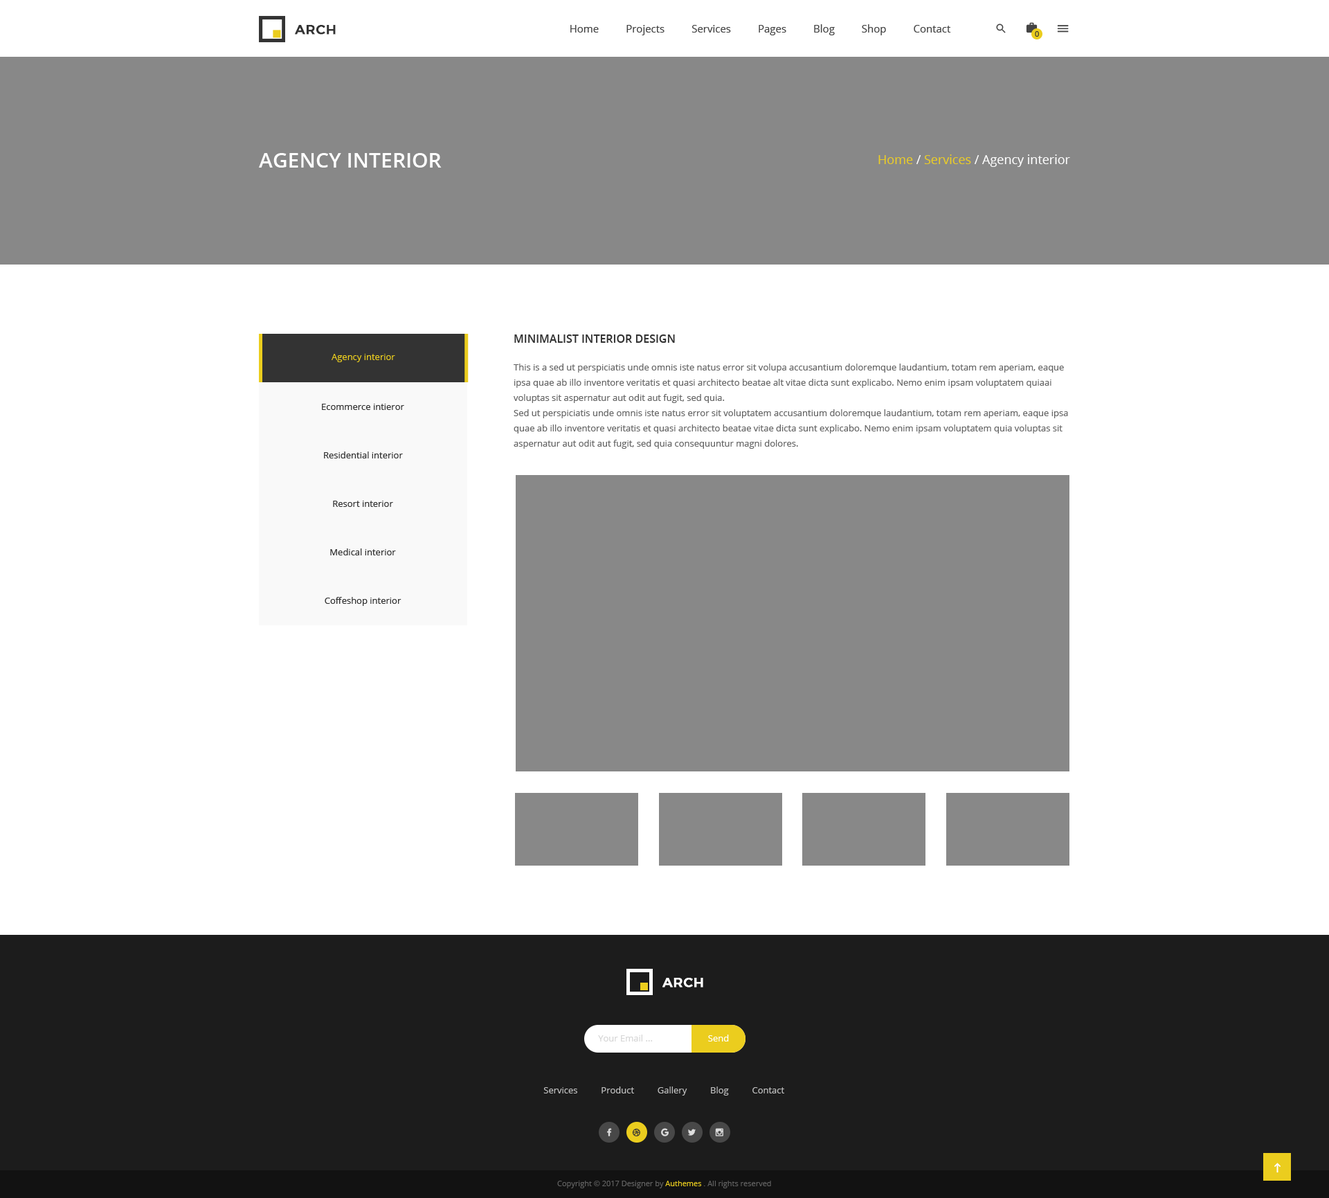
<style>
.page{position:relative;width:1329px;height:1198px;background:#ffffff}
.page>*{position:absolute;margin:0}
.t1{font:13.2px "Montserrat-Medium";letter-spacing:0.025em;color:#333333;text-transform:uppercase;font-weight:bold}
.t2{font:10.4px "OpenSans";color:#444444}
.t3{font:7.6px "OpenSans";color:#333333}
.t4{font:20.8px "OpenSans-Semibold";color:#ffffff;text-transform:uppercase}
.t5{font:12.5px "OpenSans-Regular";color:#ffffff}
.t6{font:12.5px "OpenSans-Regular";color:#ebcd1e}
.t7{font:11.1px "OpenSans-Semibold";color:#333333;text-transform:uppercase}
.t8{font:9px "OpenSans";color:#ebcd1e}
.t9{font:9px/15.2px "OpenSans";color:#666666}
.t10{font:9px "OpenSans";color:#333333}
.t11{font:13.2px "Montserrat-Medium";letter-spacing:0.025em;color:#ffffff;text-transform:uppercase;font-weight:bold}
.t12{font:9px "OpenSans";color:#d6d6d6}
.t13{font:9px "OpenSans";color:#ffffff}
.t14{font:9px "OpenSans";color:#c2c2c2}
.t15{font:7.6px "OpenSans";color:#626262}
.t16{font:7.6px "OpenSans";color:#ebcd1e}
</style>
<div class="page">
<p class="t1" style="left:295px;top:25px;width:41px;height:10px">arch</p>
<p class="t2" style="left:570px;top:24px;width:381px;height:11px">Home          Projects          Services          Pages          Blog          Shop          Contact</p>
<p class="t3" style="left:1035px;top:31px;width:4px;height:6px">0</p>
<p class="t4" style="left:259px;top:153px;width:183px;height:15px">agency interior</p>
<p class="t5" style="left:879px;top:154px;width:191px;height:13px"><span class="t6">Home </span>/<span class="t6"> Services </span>/ Agency interior</p>
<p class="t7" style="left:514px;top:334px;width:161px;height:9px">Minimalist interior design</p>
<p class="t8" style="left:332px;top:354px;width:63px;height:8px">Agency interior</p>
<p class="t9" style="left:514px;top:363px;width:554px;height:86px">This is a sed ut perspiciatis unde omnis iste natus error sit volupa accusantium doloremque laudantium, totam rem aperiam, eaque ipsa quae ab illo inventore veritatis et quasi architecto beatae alt vitae dicta sunt explicabo. Nemo enim ipsam voluptatem quiaai voluptas sit aspernatur aut odit aut fugit, sed quia.<br>Sed ut perspiciatis unde omnis iste natus error sit voluptatem accusantium doloremque laudantium, totam rem aperiam, eaque ipsa quae ab illo inventore veritatis et quasi architecto beatae vitae dicta sunt explicabo. Nemo enim ipsam voluptatem quia voluptas sit aspernatur aut odit aut fugit, sed quia consequuntur magni dolores.</p>
<p class="t10" style="left:322px;top:404px;width:82px;height:6px">Ecommerce intieror</p>
<p class="t10" style="left:324px;top:451px;width:79px;height:7px">Residential interior</p>
<p class="t10" style="left:333px;top:501px;width:60px;height:6px">Resort interior</p>
<p class="t10" style="left:330px;top:548px;width:66px;height:7px">Medical interior</p>
<p class="t10" style="left:325px;top:597px;width:77px;height:9px">Coffeshop interior</p>
<p class="t11" style="left:663px;top:978px;width:40px;height:9px">arch</p>
<p class="t12" style="left:598px;top:1034px;width:55px;height:7px">Your Email ...</p>
<p class="t13" style="left:708px;top:1034px;width:21px;height:7px">Send</p>
<p class="t14" style="left:543px;top:1086px;width:241px;height:9px">Services          Product          Gallery          Blog          Contact</p>
<p class="t15" style="left:557px;top:1180px;width:214px;height:8px">Copyright © 2017 Designer by <span class="t16">Authemes </span>. All rights reserved</p>
</div>
